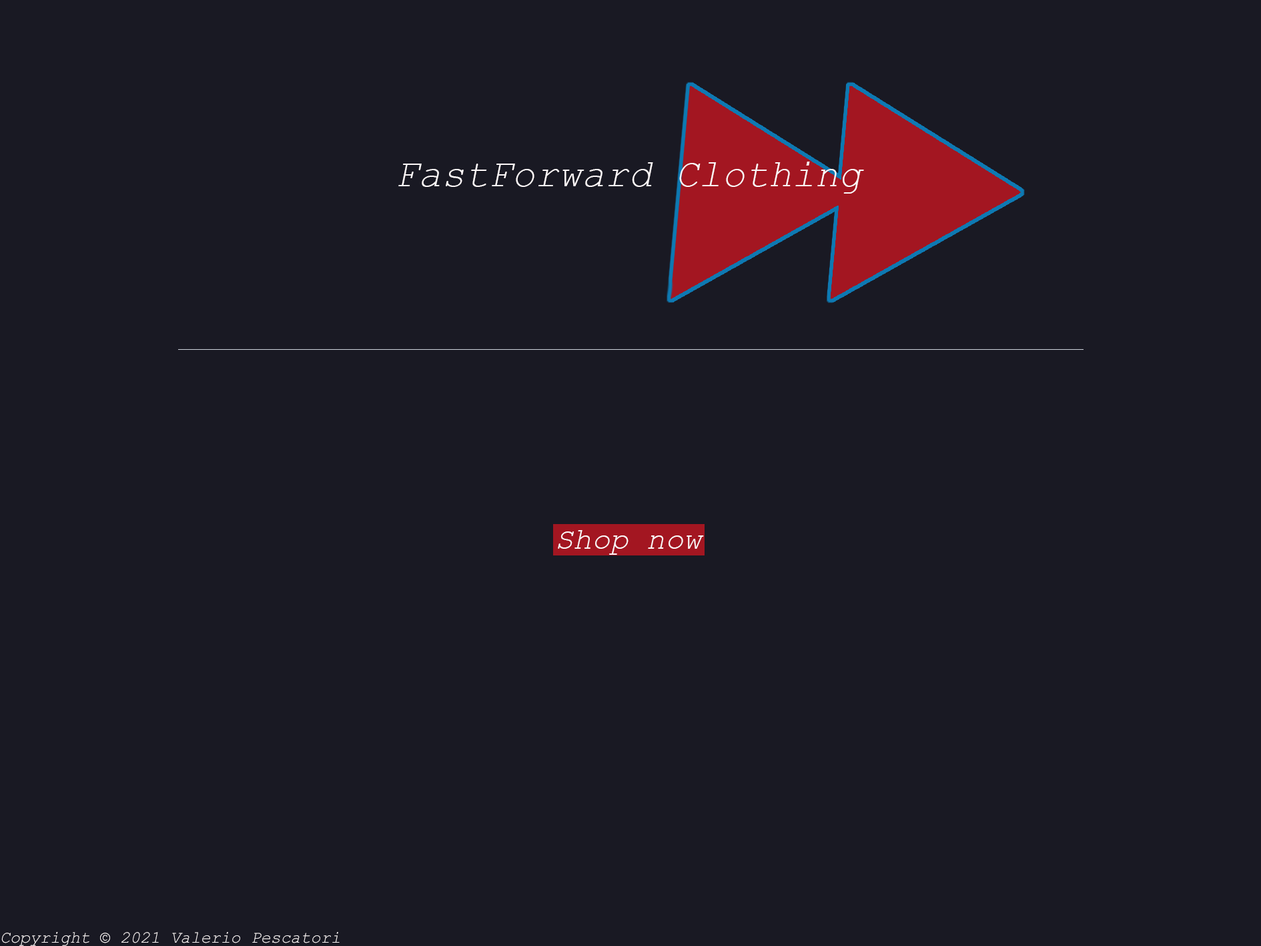
<style>
.page{position:relative;width:1261px;height:946px;background:#191923}
.page>*{position:absolute;margin:0}
.t1{font:38.9px "CourierNewPS-ItalicMT";color:#fcf7f8}
.t2{font:30.6px "CourierNewPS-ItalicMT";color:#fcf7f8}
.t3{font:16.7px "CourierNewPS-ItalicMT";color:#fcf7f8}
</style>
<div class="page">
<p class="t1" style="left:398px;top:161px;width:466px;height:33px">FastForward Clothing</p>
<p class="t2" style="left:558px;top:530px;width:146px;height:25px">Shop now</p>
<p class="t3" style="left:1px;top:932px;width:339px;height:14px">Copyright © 2021 Valerio Pescatori</p>
</div>
